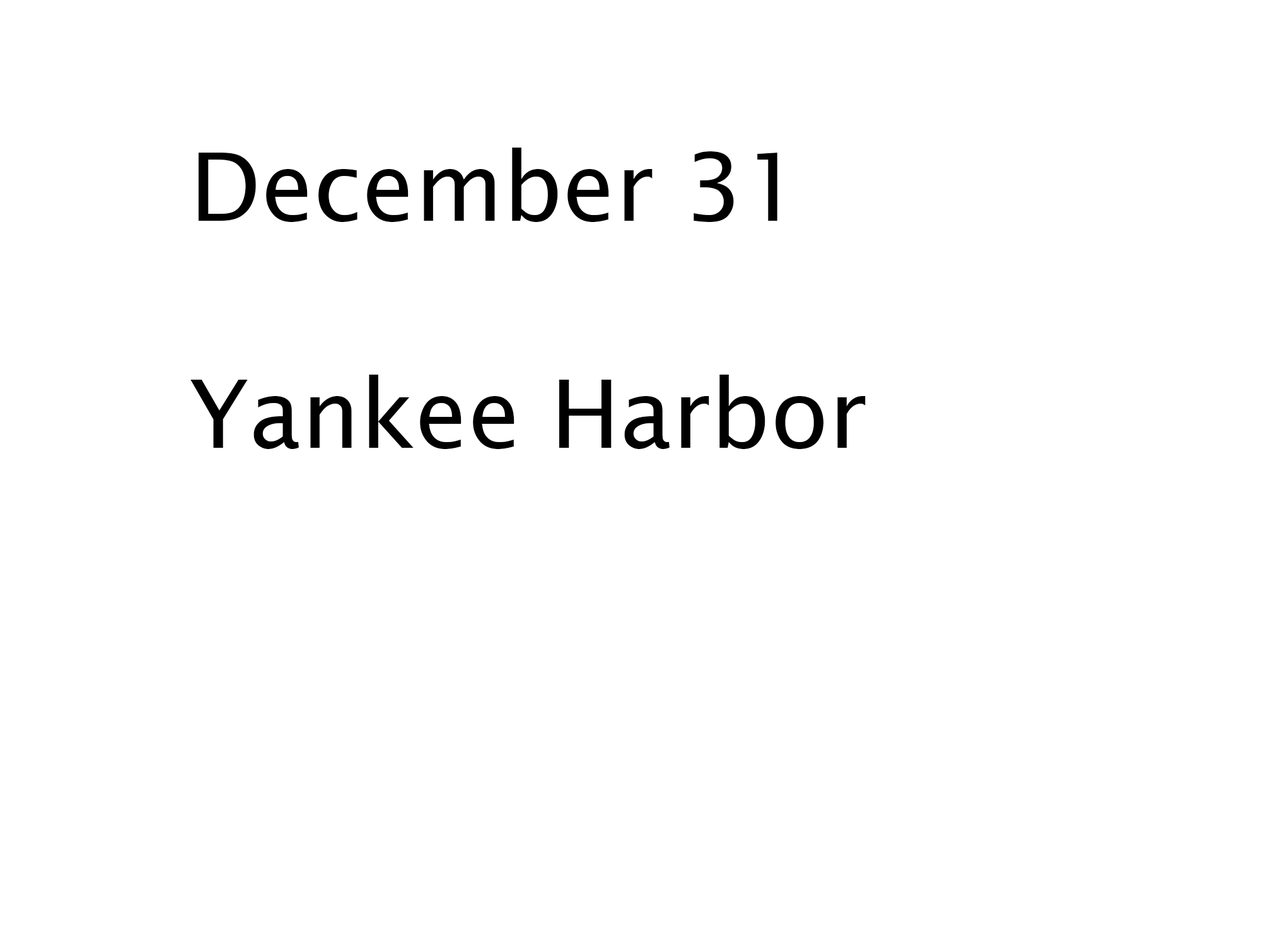
<style>
.page{position:relative;width:1261px;height:946px;background:#ffffff}
.page>*{position:absolute;margin:0}
.t1{font:94.6px "LucidaSans";color:#000000}
</style>
<div class="page">
<p class="t1" style="left:190px;top:148px;width:676px;height:301px">December 31<br><br>Yankee Harbor</p>
</div>
